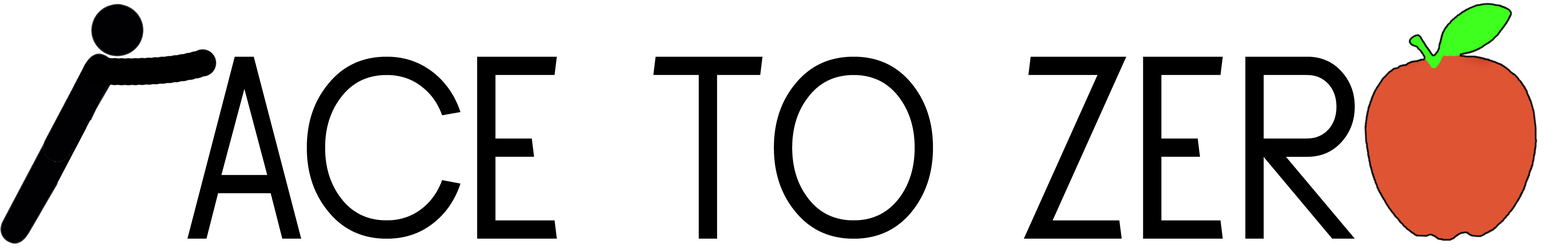
<style>
.page{position:relative;width:1568px;height:248px;background:#ffffff}
.page>*{position:absolute;margin:0}
.t1{font:272.8px "SFButtacupLettering";color:#000000}
</style>
<div class="page">
<p class="t1" style="left:187px;top:57px;width:1168px;height:181px">ACE TO ZER</p>
</div>
